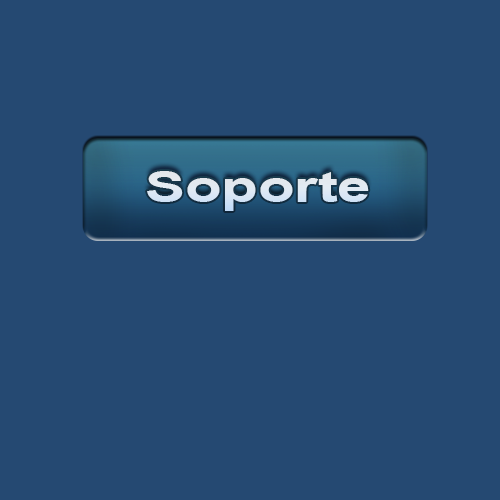
<style>
.page{position:relative;width:500px;height:500px;background:#254972}
.page>*{position:absolute;margin:0}
.t1{font:42.9px "Arial-BoldMT";color:#e8edf2;scale:1.39 1}
</style>
<div class="page">
<p class="t1" style="left:147px;top:171px;width:222px;height:40px">Soporte</p>
</div>
